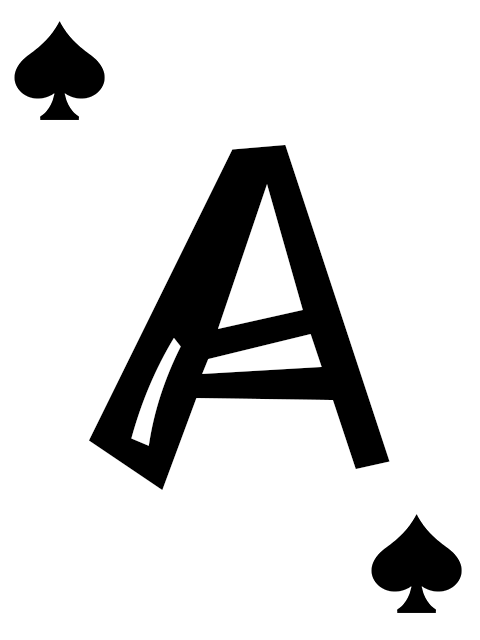
<style>
.page{position:relative;width:480px;height:640px;background:#ffffff}
.page>*{position:absolute;margin:0}
.t1{font:386.3px "Jokerman-Regular";color:#000000}
</style>
<div class="page">
<p class="t1" style="left:88px;top:145px;width:302px;height:345px">A</p>
</div>
